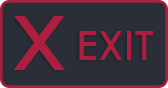
<style>
.page{position:relative;width:168px;height:88px;background:#2a2e37}
.page>*{position:absolute;margin:0}
.t1{font:86.6px "TwCenMT-Regular";color:#b01e3f;scale:1.23 1}
.t2{font:47.1px "TwCenMT-Regular";color:#b01e3f}
</style>
<div class="page">
<p class="t1" style="left:13px;top:16px;width:52px;height:54px">X</p>
<p class="t2" style="left:79px;top:31px;width:75px;height:29px">EXIT</p>
</div>
